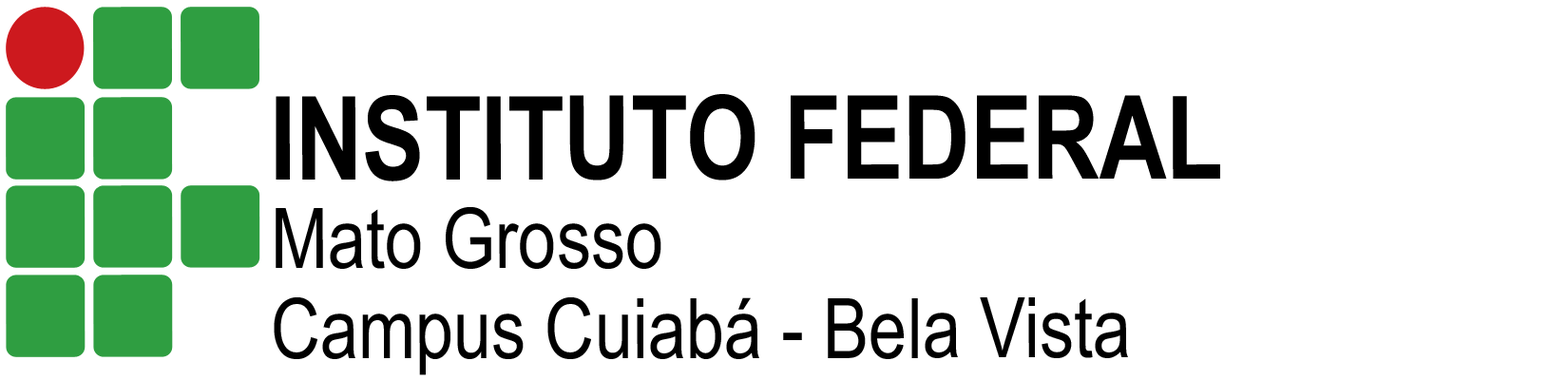
<style>
.page{position:relative;width:1568px;height:380px;background:#ffffff}
.page>*{position:absolute;margin:0}
.t1{font:115.9px "ArialNarrow-Bold";color:#000000}
.t2{font:83.6px "ArialNarrow";color:#000000}
</style>
<div class="page">
<p class="t1" style="left:276px;top:94px;width:944px;height:88px">INSTITUTO FEDERAL</p>
<p class="t2" style="left:276px;top:207px;width:385px;height:62px">Mato Grosso</p>
<p class="t2" style="left:274px;top:297px;width:854px;height:78px">Campus Cuiabá - Bela Vista</p>
</div>
